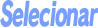
<style>
.page{position:relative;width:98px;height:28px;background:#ffffff}
.page>*{position:absolute;margin:0}
.t1{font:32px "RodinPro-EB";letter-spacing:-0.051em;color:#789ffe;font-style:italic;scale:0.6 1}
</style>
<div class="page">
<p class="t1" style="left:0px;top:0px;width:98px;height:27px">Selecionar</p>
</div>
